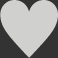
<style>
.page{position:relative;width:58px;height:58px;background:#d0d0ce}
.page>*{position:absolute;margin:0}
.t1{font:72px "KozGoPr6N-Regular";color:#d8d8d6}
</style>
<div class="page">
<p class="t1" style="left:0px;top:0px;width:58px;height:58px;opacity:0.95">♥</p>
</div>
